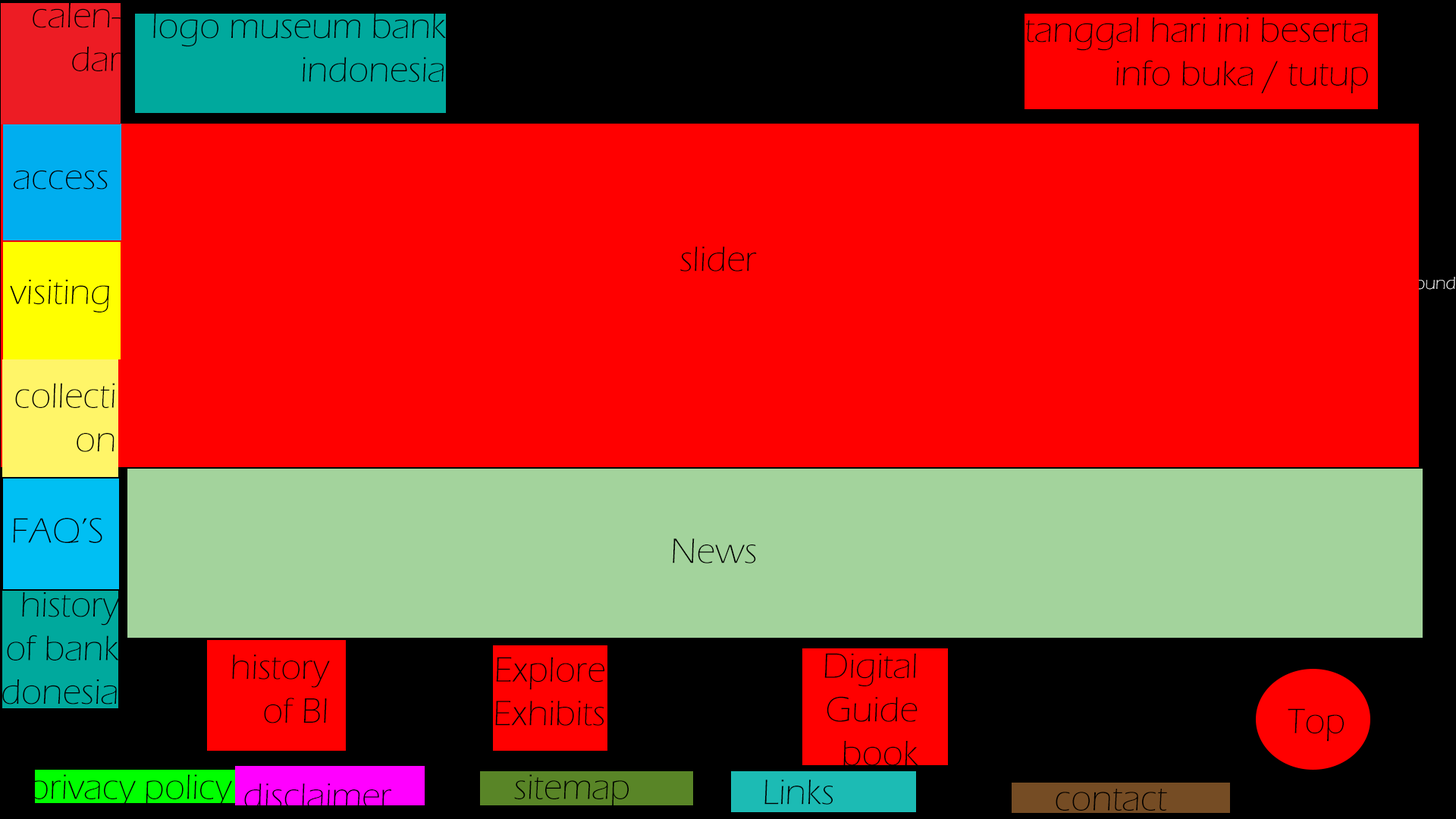
<style>
.page{position:relative;width:1456px;height:819px;background:#ff0000}
.page>*{position:absolute;margin:0}
.t1{font:36.4px "ErasITC-Light";color:#000000}
.t2{font:18.2px "ErasITC-Light"}
</style>
<div class="page">
<p class="t1" style="left:33px;top:3px;width:88px;height:68px">calendar</p>
<p class="t1" style="left:153px;top:14px;width:293px;height:68px">logo museum bank indonesia</p>
<p class="t1" style="left:1025px;top:17px;width:343px;height:76px">tanggal hari ini beserta info buka / tutup</p>
<p class="t1" style="left:14px;top:170px;width:94px;height:20px">access</p>
<p class="t1" style="left:680px;top:246px;width:77px;height:25px">slider</p>
<p class="t1" style="left:10px;top:279px;width:99px;height:33px">visiting</p>
<p class="t2" style="left:1360px;top:277px;width:95px;height:16px">back ground</p>
<p class="t1" style="left:15px;top:383px;width:100px;height:69px">collecti<br>on</p>
<p class="t1" style="left:13px;top:518px;width:89px;height:25px">FAQ’S</p>
<p class="t1" style="left:673px;top:538px;width:83px;height:25px">News</p>
<p class="t1" style="left:824px;top:653px;width:94px;height:113px">Digital <br>Guide <br>book</p>
<p class="t1" style="left:232px;top:654px;width:98px;height:69px">history <br>of BI</p>
<p class="t1" style="left:495px;top:657px;width:109px;height:69px">Explore <br>Exhibits</p>
<p class="t1" style="left:1288px;top:708px;width:56px;height:34px">Top</p>
<p class="t1" style="left:30px;top:774px;width:202px;height:34px">privacy policy</p>
<p class="t1" style="left:244px;top:783px;width:147px;height:25px">disclaimer</p>
<p class="t1" style="left:514px;top:774px;width:115px;height:33px">sitemap</p>
<p class="t1" style="left:764px;top:780px;width:69px;height:25px">Links</p>
<p class="t1" style="left:1056px;top:789px;width:111px;height:22px">contact</p>
</div>
